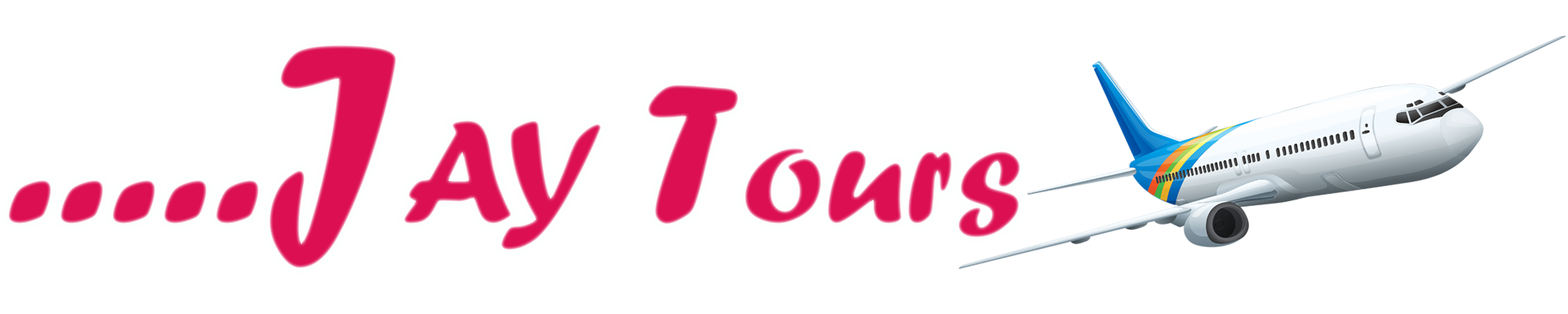
<style>
.page{position:relative;width:1568px;height:314px;background:#ffffff}
.page>*{position:absolute;margin:0}
.t1{font:261.3px "ForteMT";color:#dc0f52}
.t2{font:152.8px "ForteMT";color:#dc0f52}
.t3{font:209.1px "ForteMT";color:#dc0f52}
</style>
<div class="page">
<p class="t1" style="left:8px;top:45px;width:1012px;height:223px">.....J<span class="t2">AY </span><span class="t3">T</span><span class="t2">ours</span></p>
</div>
